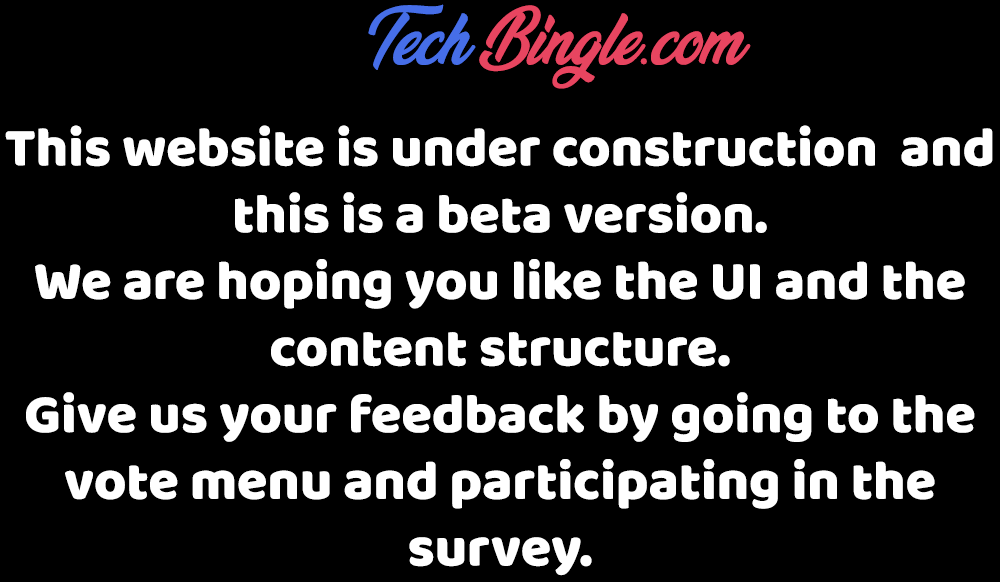
<style>
.page{position:relative;width:1000px;height:582px;background:#000000}
.page>*{position:absolute;margin:0}
.t1{font:55.6px "VeganStylePersonalUse";color:#466ee8}
.t2{font:55.6px "VeganStylePersonalUse";color:#e84560}
.t3{font:55.6px "TimesNewRomanPSMT";color:#e84560}
.t4{font:55.6px "BalooDa-Regular";color:#ffffff}
</style>
<div class="page">
<p class="t1" style="left:368px;top:4px;width:108px;height:66px">Tech</p>
<p class="t2" style="left:479px;top:5px;width:272px;height:84px">Bingle<span class="t3">.</span>com</p>
<p class="t4" style="left:5px;top:125px;width:988px;height:451px;text-align:center">This website is under construction  and this is a beta version.<br>We are hoping you like the UI and the content structure.<br>Give us your feedback by going to the vote menu and participating in the survey.</p>
</div>
